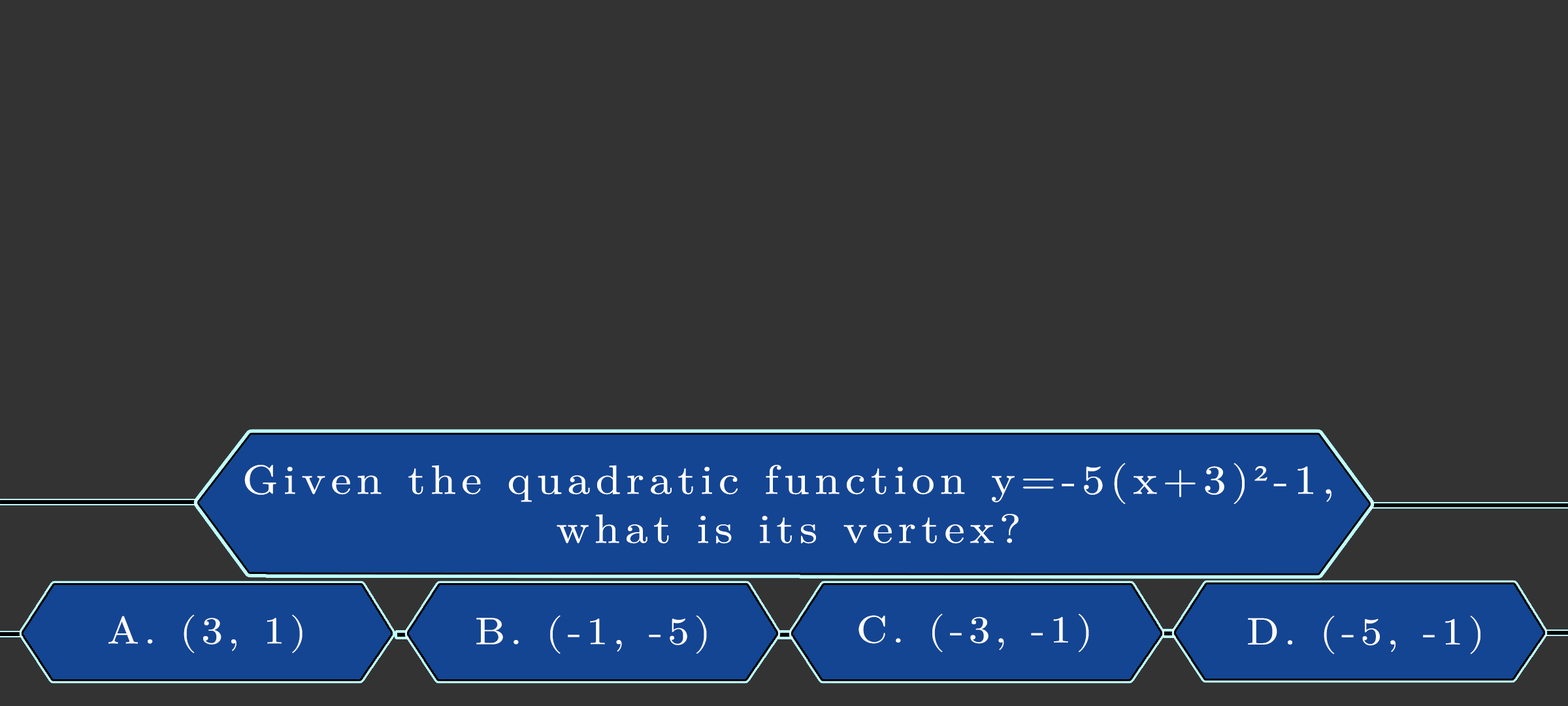
<style>
.page{position:relative;width:1568px;height:706px;background:#333333}
.page>*{position:absolute;margin:0}
.t1{font:40.8px/49px "LatinModernMath-Regular";letter-spacing:0.115em;color:#ffffff;scale:1.12 1}
.t2{font:40.8px/49px "TimesNewRomanPSMT";letter-spacing:0.115em;color:#ffffff;scale:1.12 1}
.t3{font:38.1px "LatinModernMath-Regular";letter-spacing:0.115em;color:#fcfbfb;text-transform:uppercase;scale:1.12 1}
.t4{font:38.1px "LatinModernMath-Regular";letter-spacing:0.115em;color:#fefcfc;text-transform:uppercase;scale:1.12 1}
.t5{font:38.1px "LatinModernMath-Regular";letter-spacing:0.115em;color:#fffefe;text-transform:uppercase;scale:1.12 1}
</style>
<div class="page">
<p class="t1" style="left:244px;top:463px;width:1087px;height:81px;text-align:center">Given the quadratic function y=-5(x+3)<span class="t2">²</span>-1,<br>what is its vertex?</p>
<p class="t3" style="left:108px;top:614px;width:194px;height:39px">a. (3, 1)</p>
<p class="t4" style="left:476px;top:615px;width:231px;height:38px">b. (-1, -5)</p>
<p class="t5" style="left:858px;top:613px;width:231px;height:39px">c. (-3, -1)</p>
<p class="t4" style="left:1248px;top:615px;width:232px;height:39px">d. (-5, -1)</p>
</div>
